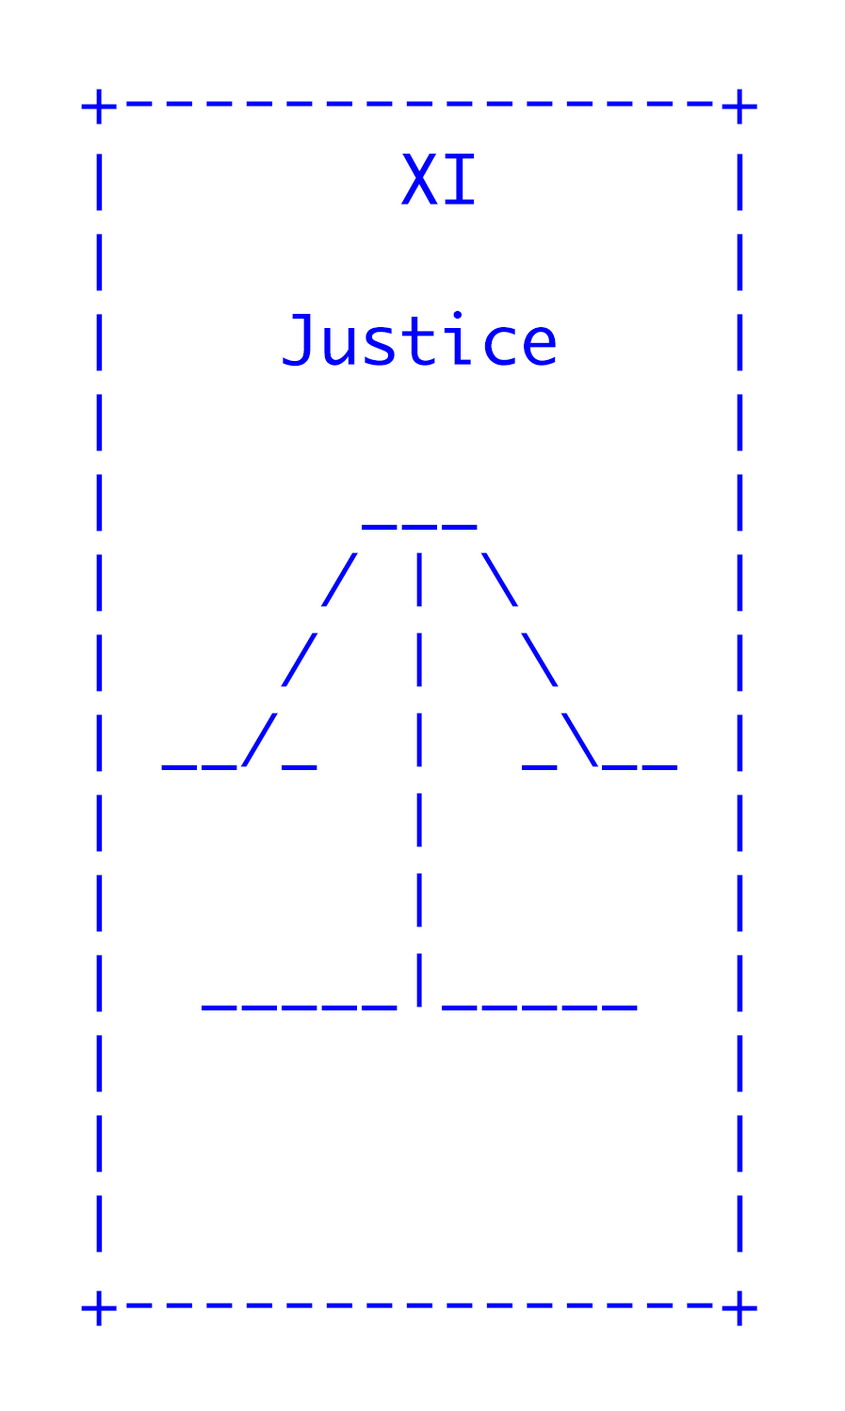
<style>
.page{position:relative;width:845px;height:1411px;background:#ffffff}
.page>*{position:absolute;margin:0}
.t1{font:66.7px "Monaco";color:#0000ff}
</style>
<div class="page">
<p class="t1" style="left:81px;top:89px;width:677px;height:1237px">+---------------+<br>│       XI      │<br>│               │<br>│    Justice    │<br>│               │<br>│      ___      │ <br>│     / | \     │ <br>│    /  |  \    │ <br>│ __/_  |  _\__ │  <br>│       |       │  <br>│       |       │  <br>│  _____|_____  │ <br>│               │<br>│               │<br>│               │<br>+---------------+</p>
</div>
